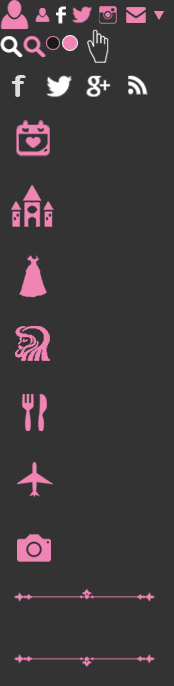
<style>
.page{position:relative;width:174px;height:686px;background:#333333}
.page>*{position:absolute;margin:0}
.t1{font:30.4px "ArialRoundedMTBold";color:#dddee1;scale:1.19 1}
</style>
<div class="page">
<p class="t1" style="left:11px;top:75px;width:15px;height:22px">f</p>
</div>
